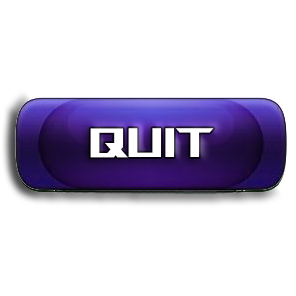
<style>
.page{position:relative;width:296px;height:296px;background:#ffffff}
.page>*{position:absolute;margin:0}
.t1{font:41px "ROGFonts-Regular";color:#ffffff}
</style>
<div class="page">
<p class="t1" style="left:90px;top:128px;width:124px;height:30px">Quit</p>
</div>
